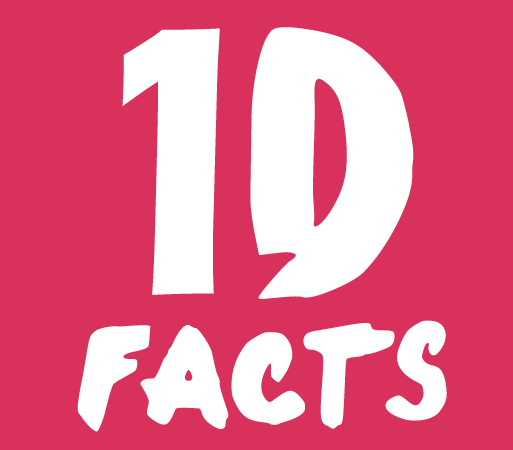
<style>
.page{position:relative;width:513px;height:450px;background:#d8315b}
.page>*{position:absolute;margin:0}
.t1{font:396.9px "ErasITC-Demi";color:#ffffff}
.t2{font:427.7px "OneDirection";color:#ffffff}
.t3{font:166.7px "OneDirection";letter-spacing:-0.075em;color:#ffffff}
.t4{font:166.7px "OneDirection";color:#ffffff}
.t5{font:166.7px "OneDirection";letter-spacing:-0.025em;color:#ffffff}
</style>
<div class="page">
<p class="t1" style="left:122px;top:28px;width:98px;height:267px;rotate:-1deg">1</p>
<p class="t2" style="left:250px;top:27px;width:164px;height:272px;rotate:-13deg">D</p>
<p class="t3" style="left:77px;top:320px;width:370px;height:112px">f<span class="t4">a</span><span class="t5">c</span>ts</p>
</div>
